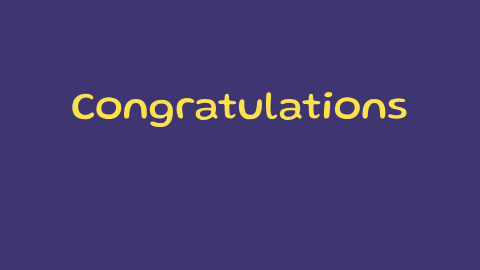
<style>
.page{position:relative;width:480px;height:270px;background:#3f3671}
.page>*{position:absolute;margin:0}
.t1{font:41px "Gluten-Regular";color:#fbe14f}
</style>
<div class="page">
<p class="t1" style="left:72px;top:91px;width:335px;height:37px">Congratulations</p>
</div>
